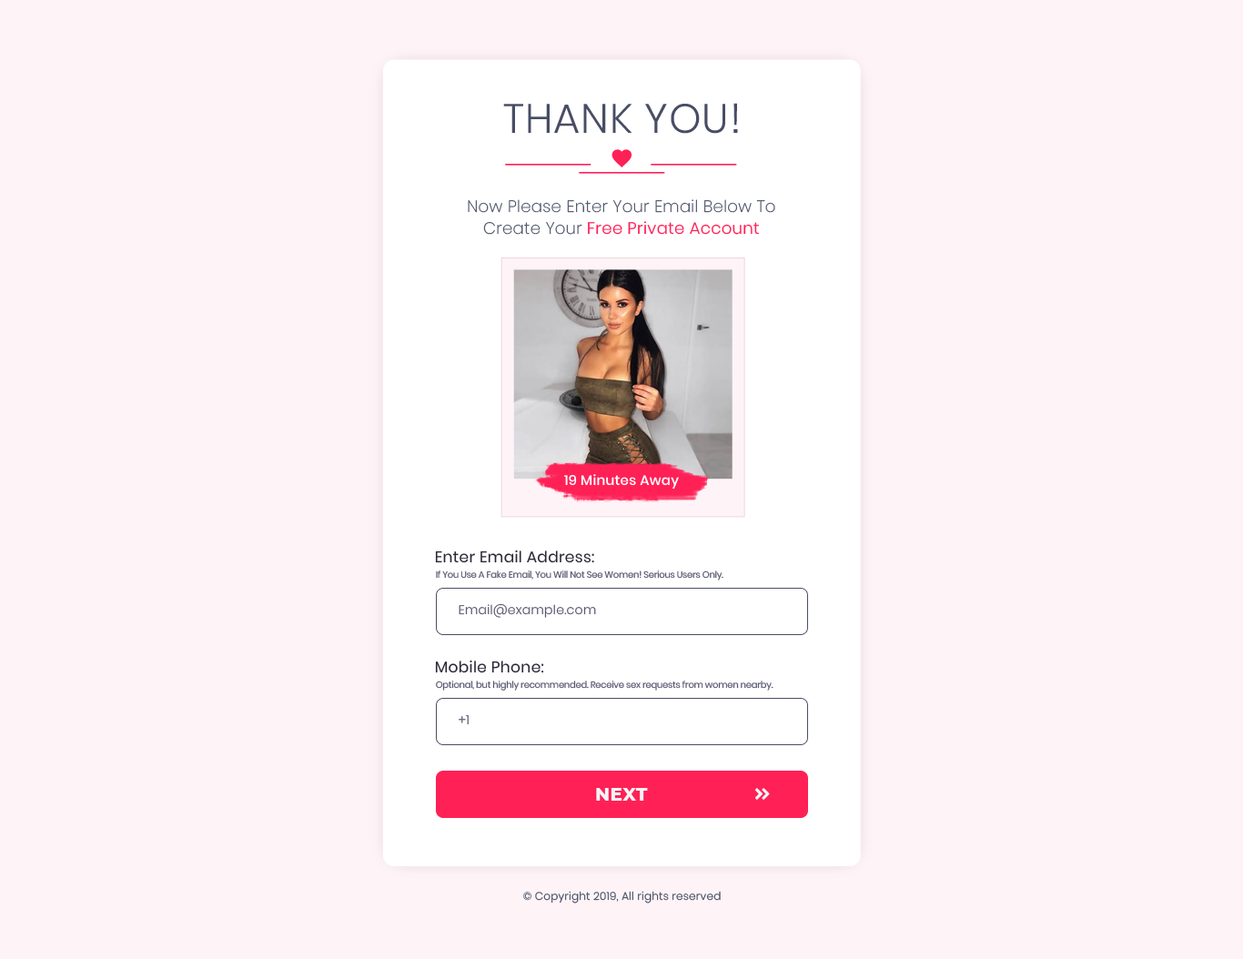
<style>
.page{position:relative;width:1243px;height:959px;background:#fef4f7}
.page>*{position:absolute;margin:0}
.t1{font:41px "Poppins-Light";letter-spacing:0.02em;color:#484d65}
.t2{font:16.4px/21.8px "Poppins-ExtraLight";letter-spacing:0.02em;color:#4c5168}
.t3{font:16.4px/21.8px "Poppins-Light";letter-spacing:0.02em;color:#ff2056}
.t4{font:13.7px "Poppins-Medium";letter-spacing:0.02em;color:#ffffff}
.t5{font:15.5px "Poppins-Regular";letter-spacing:0.02em;color:#282836}
.t6{font:9.1px "Poppins-Regular";letter-spacing:-0.025em;color:#595972}
.t7{font:12.7px "Poppins-Light";letter-spacing:0.02em;color:#595972}
.t8{font:18.2px "Montserrat-ExtraBold";letter-spacing:0.02em;color:#f5f5f5}
.t9{font:10.9px "Poppins-Light";letter-spacing:0.02em;color:#4c5168}
</style>
<div class="page">
<p class="t1" style="left:503px;top:103px;width:235px;height:31px">THANK YOU!</p>
<p class="t2" style="left:468px;top:199px;width:307px;height:36px;text-align:center">Now Please Enter Your Email Below To<br>Create Your <span class="t3">Free Private Account</span></p>
<p class="t4" style="left:564px;top:474px;width:115px;height:16px">19 Minutes Away</p>
<p class="t5" style="left:435px;top:550px;width:159px;height:13px">Enter Email Address:</p>
<p class="t6" style="left:436px;top:571px;width:287px;height:10px">If You Use A Fake Email, You Will Not See Women! Serious Users Only.</p>
<p class="t7" style="left:459px;top:603px;width:137px;height:15px">Email@example.com</p>
<p class="t5" style="left:435px;top:660px;width:109px;height:13px">Mobile Phone:</p>
<p class="t6" style="left:436px;top:681px;width:338px;height:10px">Optional, but highly recommended. Receive sex requests from women nearby.</p>
<p class="t7" style="left:459px;top:715px;width:10px;height:10px">+1</p>
<p class="t8" style="left:596px;top:788px;width:52px;height:13px">NEXT</p>
<p class="t9" style="left:523px;top:891px;width:198px;height:13px">© Copyright 2019, All rights reserved</p>
</div>
